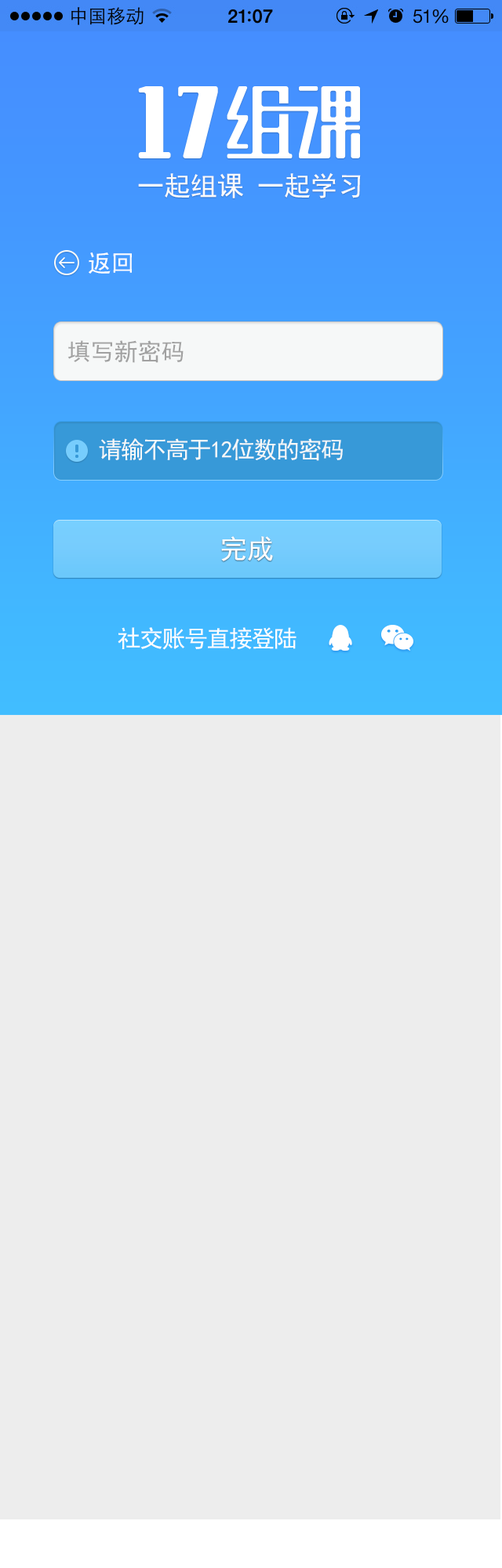
<style>
.page{position:relative;width:502px;height:1568px;background:#ededed}
.page>*{position:absolute;margin:0}
.t1{font:26.7px "SimHei";color:#fbfbfb}
.t2{font:23.5px "SimHei";color:#fefefe}
.t3{font:23.5px "SimHei";color:#a1a1a1}
.t4{font:23.5px "SimHei";letter-spacing:-0.05em;color:#f6f8f8}
.t5{font:26.7px "SimHei";color:#fefefe}
.t6{font:23.5px "SimHei";letter-spacing:-0.05em;color:#fefefe}
</style>
<div class="page">
<p class="t1" style="left:138px;top:172px;width:223px;height:26px">一起组课 一起学习</p>
<p class="t2" style="left:89px;top:252px;width:43px;height:22px">返回</p>
<p class="t3" style="left:67px;top:340px;width:116px;height:23px">填写新密码</p>
<p class="t4" style="left:99px;top:438px;width:244px;height:23px">请输不高于12位数的密码</p>
<p class="t5" style="left:221px;top:536px;width:52px;height:25px">完成</p>
<p class="t6" style="left:118px;top:627px;width:178px;height:23px">社交账号直接登陆</p>
</div>
